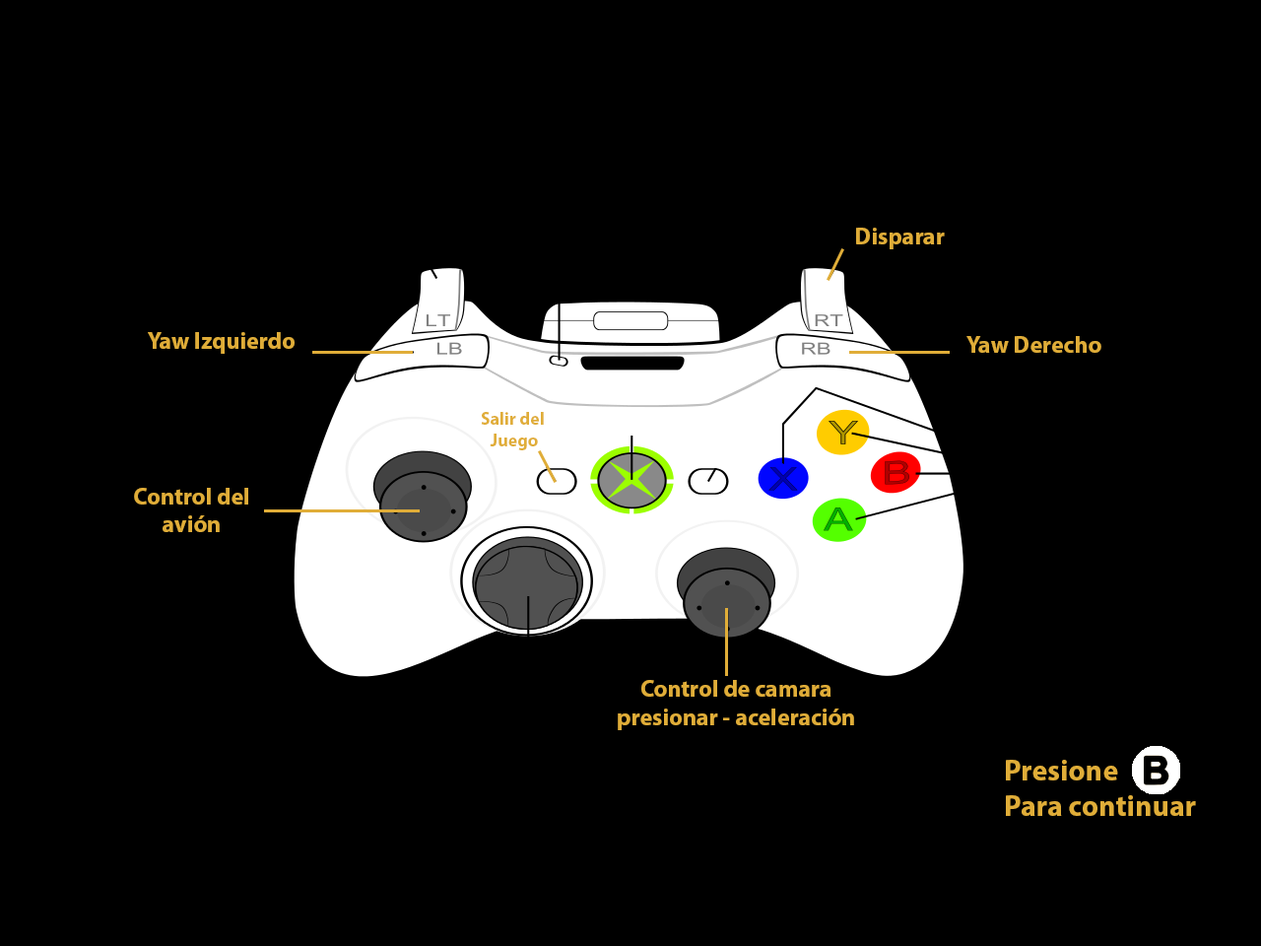
<style>
.page{position:relative;width:1261px;height:946px;background:#000000}
.page>*{position:absolute;margin:0}
.t1{font:23.6px "MyriadPro-Bold";color:#e0ad38}
.t2{font:17.7px "MyriadPro-Bold";color:#e0ad38}
.t3{font:29.6px "MyriadPro-Bold";color:#e0ad38}
</style>
<div class="page">
<p class="t1" style="left:856px;top:228px;width:89px;height:21px">Disparar</p>
<p class="t1" style="left:148px;top:332px;width:147px;height:22px">Yaw Izquierdo</p>
<p class="t1" style="left:966px;top:336px;width:135px;height:17px">Yaw Derecho</p>
<p class="t2" style="left:481px;top:412px;width:63px;height:38px;text-align:center">Salir del <br>Juego</p>
<p class="t1" style="left:134px;top:488px;width:114px;height:44px;text-align:center">Control del<br>avión</p>
<p class="t1" style="left:618px;top:680px;width:236px;height:50px;text-align:center">Control de camara <br>presionar - aceleración</p>
<p class="t3" style="left:1006px;top:760px;width:190px;height:56px">Presione <br>Para continuar</p>
</div>
